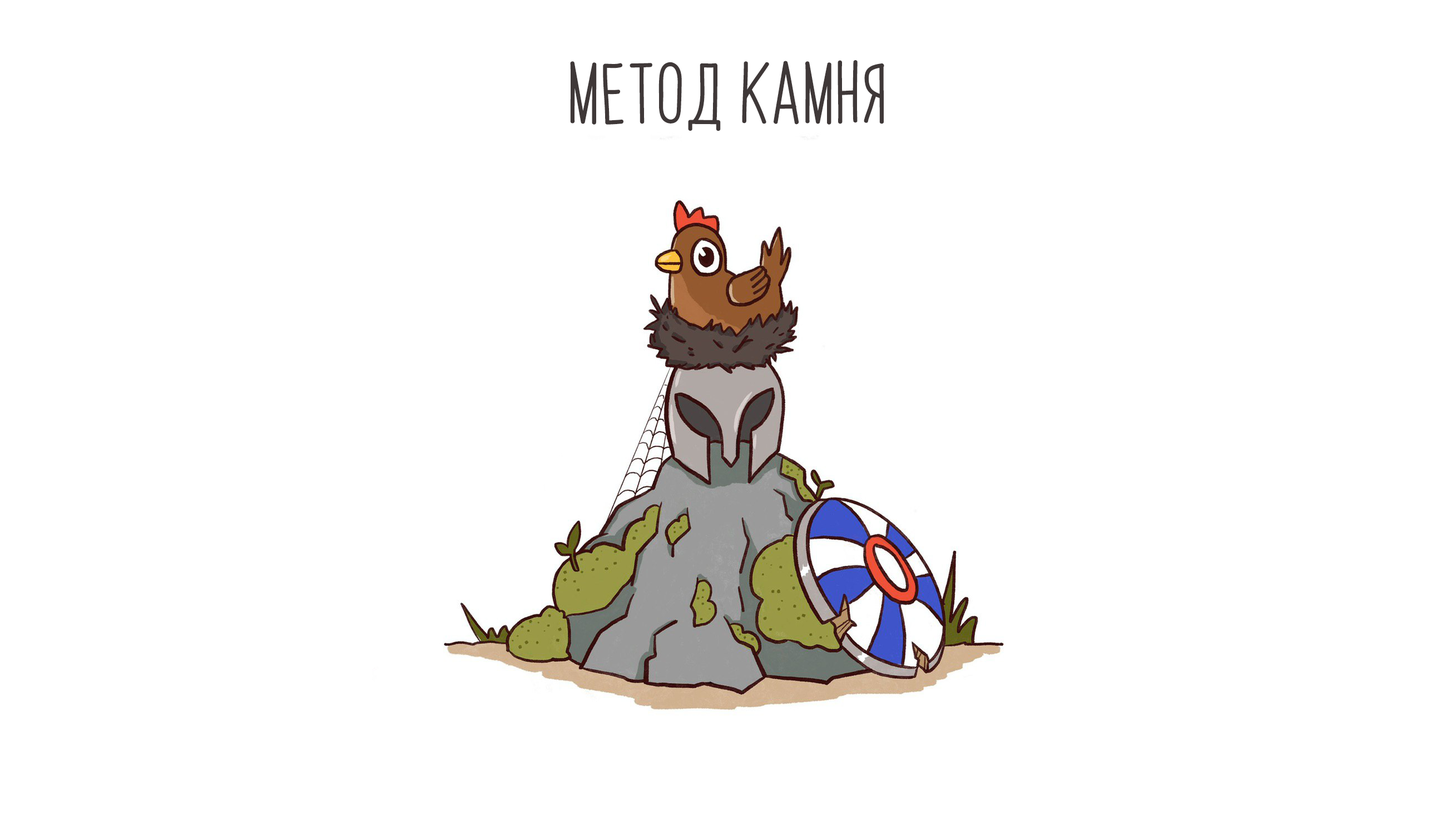
<style>
.page{position:relative;width:1456px;height:819px;background:#ffffff}
.page>*{position:absolute;margin:0}
.t1{font:52.4px "PapayaSunrise";color:#3f3838}
</style>
<div class="page">
<p class="t1" style="left:570px;top:60px;width:314px;height:71px">метод камня</p>
</div>
